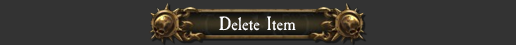
<style>
.page{position:relative;width:516px;height:45px;background:#333333}
.page>*{position:absolute;margin:0}
.t1{font:20px "CaslonAntique";color:#fefefe}
</style>
<div class="page">
<p class="t1" style="left:219px;top:16px;width:77px;height:15px">Delete Item</p>
</div>
